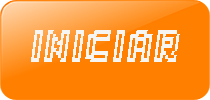
<style>
.page{position:relative;width:210px;height:100px;background:#ff7f00}
.page>*{position:absolute;margin:0}
.t1{font:47.1px "Sabo-Regular";color:#f7f5f2;font-style:italic;scale:0.78 1}
</style>
<div class="page">
<p class="t1" style="left:31px;top:30px;width:149px;height:32px">INICIAR</p>
</div>
